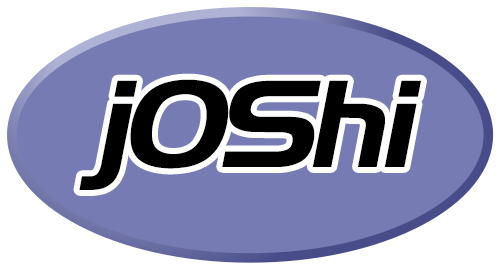
<style>
.page{position:relative;width:500px;height:270px;background:#777bb3}
.page>*{position:absolute;margin:0}
.t1{font:120px "HandelGothic";letter-spacing:-0.062em;color:#000000;font-style:italic;scale:1.1 1}
</style>
<div class="page">
<p class="t1" style="left:79px;top:79px;width:342px;height:111px">j0Shi</p>
</div>
